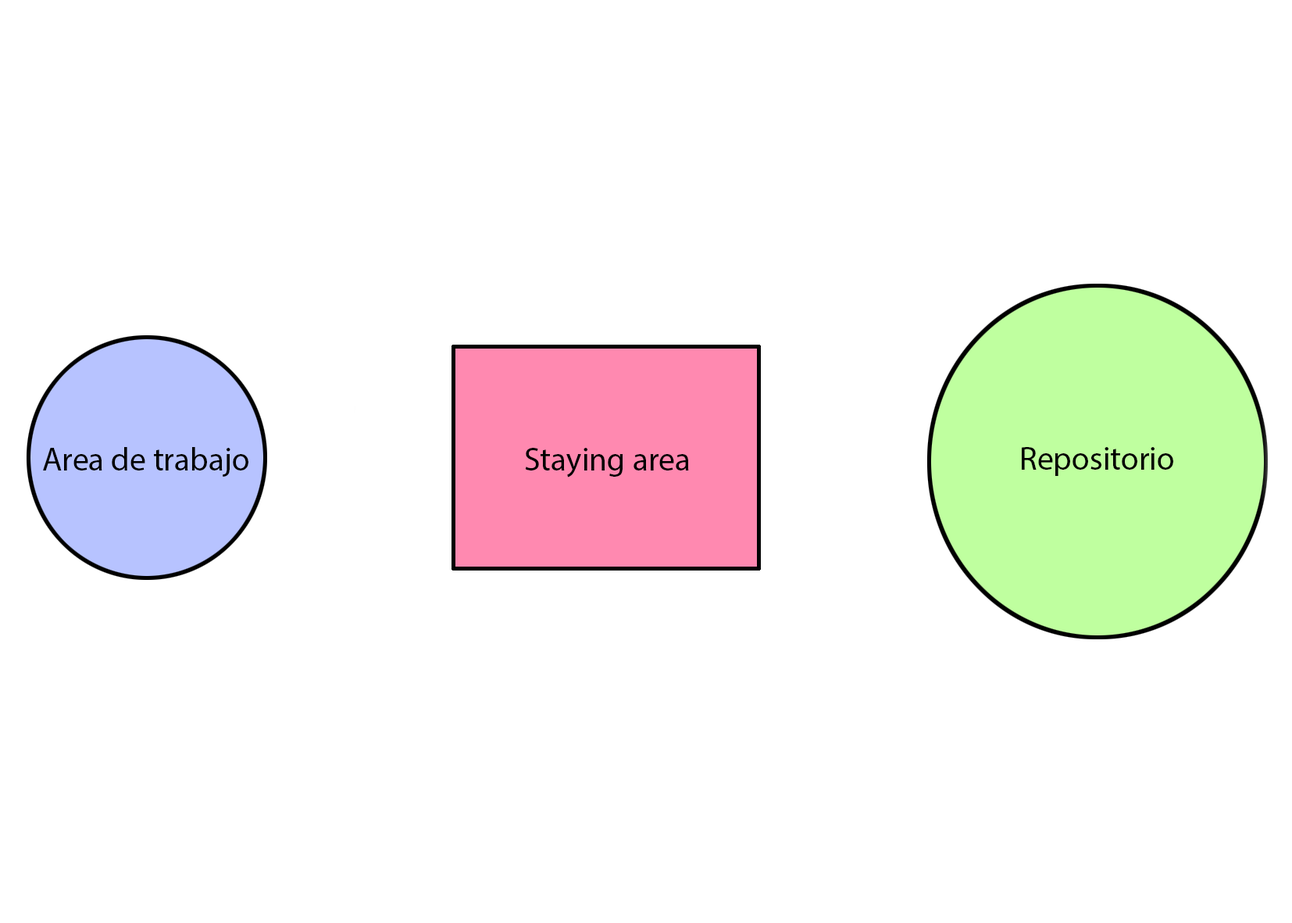
<style>
.page{position:relative;width:1292px;height:923px;background:#ffffff}
.page>*{position:absolute;margin:0}
.t1{font:32.6px "MyriadPro-Regular";color:#000000}
</style>
<div class="page">
<p class="t1" style="left:43px;top:447px;width:205px;height:30px">Area de trabajo</p>
<p class="t1" style="left:525px;top:448px;width:164px;height:29px">Staying area</p>
<p class="t1" style="left:1022px;top:447px;width:152px;height:29px">Repositorio</p>
</div>
